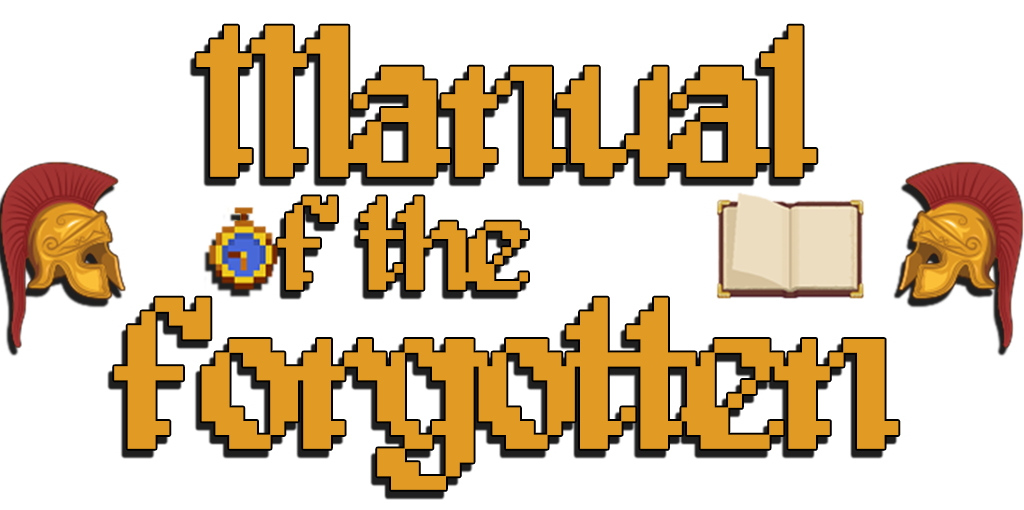
<style>
.page{position:relative;width:1024px;height:510px;background:#ffffff}
.page>*{position:absolute;margin:0}
.t1{font:219.2px "Alagard";letter-spacing:-0.1em;color:#e19b24}
.t2{font:135.3px "Alagard";letter-spacing:-0.1em;color:#e19b24}
</style>
<div class="page">
<p class="t1" style="left:196px;top:25px;width:621px;height:152px">Manual</p>
<p class="t2" style="left:277px;top:196px;width:251px;height:94px">f the</p>
<p class="t1" style="left:114px;top:297px;width:785px;height:193px">forgotten</p>
</div>
